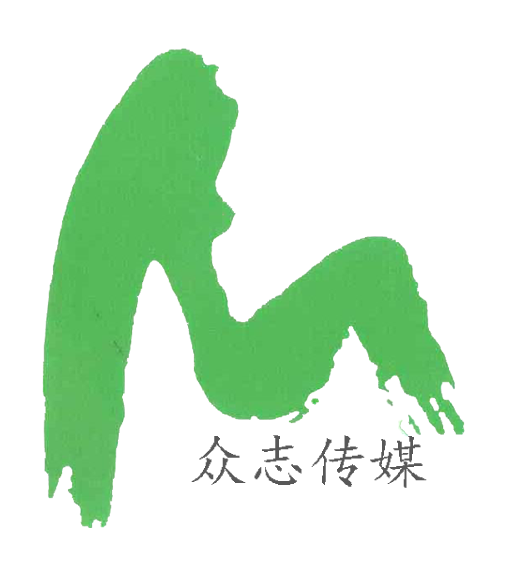
<style>
.page{position:relative;width:507px;height:576px;background:#ffffff}
.page>*{position:absolute;margin:0}
.t1{font:60px "¿¬Ìå";color:#585858}
</style>
<div class="page">
<p class="t1" style="left:191px;top:435px;width:236px;height:53px">众志传媒</p>
</div>
